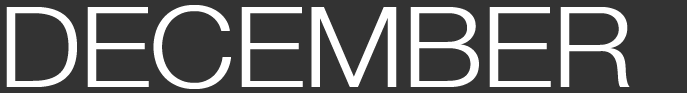
<style>
.page{position:relative;width:687px;height:93px;background:#333333}
.page>*{position:absolute;margin:0}
.t1{font:112.5px "HelveticaNeueLTCom-Lt";letter-spacing:-0.02em;color:#ffffff;scale:1.09 1}
</style>
<div class="page">
<p class="t1" style="left:6px;top:5px;width:624px;height:84px">DECEMBER</p>
</div>
